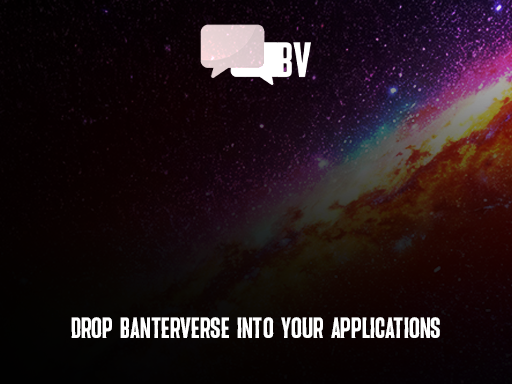
<style>
.page{position:relative;width:512px;height:384px}
.page>*{position:absolute;margin:0}
.t1{font:24px "Flavor_sans";color:#ffffff;text-transform:uppercase}
</style>
<div class="page">
<p class="t1" style="left:71px;top:317px;width:369px;height:21px">drop banterverse into your applications</p>
</div>
